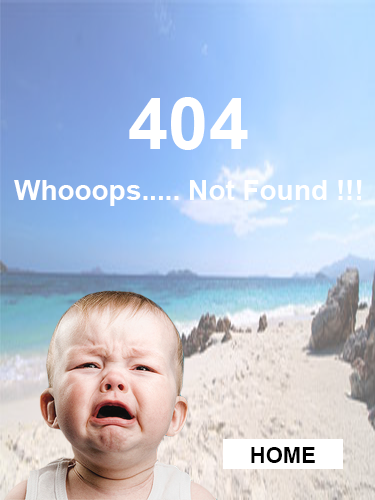
<style>
.page{position:relative;width:375px;height:500px}
.page>*{position:absolute;margin:0}
.t1{font:72px "Arial-BoldMT";color:#ffffff}
.t2{font:28px "Arial-BoldMT";color:#ffffff}
.t3{font:22px "Arial-BoldMT";color:#000000}
</style>
<div class="page">
<p class="t1" style="left:129px;top:97px;width:119px;height:53px">404</p>
<p class="t2" style="left:14px;top:180px;width:348px;height:26px">Whooops..... Not Found !!!</p>
<p class="t3" style="left:251px;top:447px;width:64px;height:16px">HOME</p>
</div>
